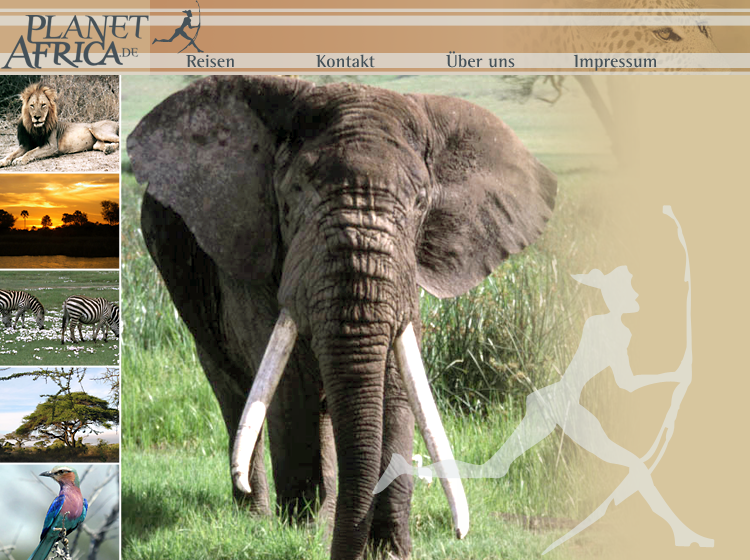
<style>
.page{position:relative;width:750px;height:560px}
.page>*{position:absolute;margin:0}
.t1{font:18px "RotisSemiSerif-Bold";color:#455158}
</style>
<div class="page">
<p class="t1" style="left:186px;top:54px;width:48px;height:14px">Reisen</p>
<p class="t1" style="left:316px;top:54px;width:59px;height:14px">Kontakt</p>
<p class="t1" style="left:446px;top:51px;width:69px;height:17px">Über uns</p>
<p class="t1" style="left:573px;top:54px;width:83px;height:17px">Impressum</p>
</div>
